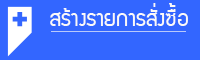
<style>
.page{position:relative;width:200px;height:60px;background:#3366ff}
.page>*{position:absolute;margin:0}
.t1{font:24px "supermarket";color:#fbf8f8}
</style>
<div class="page">
<p class="t1" style="left:50px;top:3px;width:138px;height:23px">สร้างรายการสั่งซื้อ</p>
</div>
